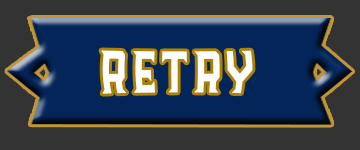
<style>
.page{position:relative;width:360px;height:150px;background:#333333}
.page>*{position:absolute;margin:0}
.t1{font:62.5px "Lorde-Havana";letter-spacing:0.1em;color:#ffffff;scale:0.75 1}
</style>
<div class="page">
<p class="t1" style="left:101px;top:50px;width:152px;height:44px">REtry</p>
</div>
